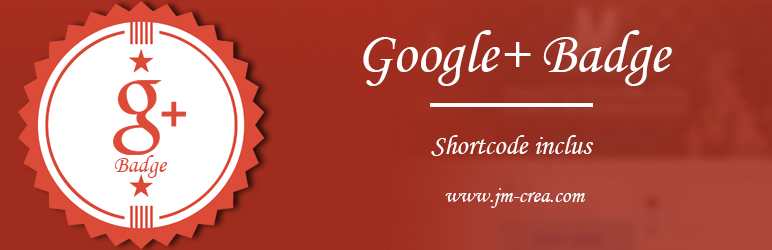
<style>
.page{position:relative;width:772px;height:250px}
.page>*{position:absolute;margin:0}
.t1{font:58.7px "MonotypeCorsiva";color:#ffffff}
.t2{font:27.9px "MonotypeCorsiva";color:#ffffff}
.t3{font:24.1px "MonotypeCorsiva";color:#dc4a38}
.t4{font:22px "MonotypeCorsiva";color:#ffffff}
</style>
<div class="page">
<p class="t1" style="left:363px;top:30px;width:309px;height:56px">Google+ Badge</p>
<p class="t2" style="left:431px;top:135px;width:162px;height:21px">Shortcode inclus</p>
<p class="t3" style="left:114px;top:155px;width:54px;height:23px">Badge</p>
<p class="t4" style="left:445px;top:188px;width:140px;height:20px">www.jm-crea.com</p>
</div>
